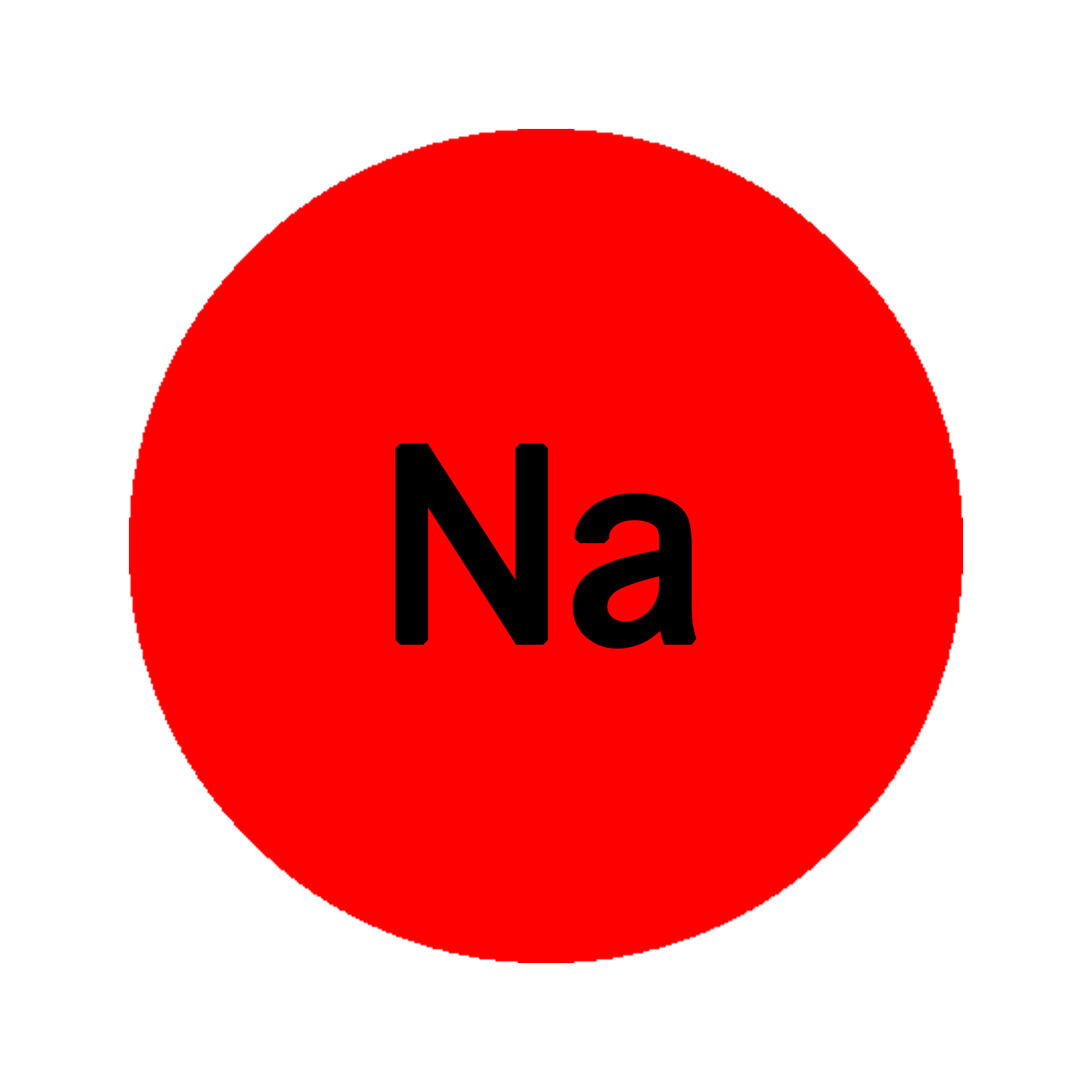
<style>
.page{position:relative;width:1092px;height:1092px;background:#ffffff}
.page>*{position:absolute;margin:0}
.t1{font:356.4px "AppleSymbols";letter-spacing:-0.02em;color:#000000;font-weight:bold}
</style>
<div class="page">
<p class="t1" style="left:395px;top:443px;width:302px;height:206px">Na</p>
</div>
